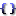
<style>
.page{position:relative;width:16px;height:16px;background:#ffffff}
.page>*{position:absolute;margin:0}
.t1{font:12px "Consolas-Bold"}
</style>
<div class="page">
<p class="t1" style="left:0px;top:3px;width:6px;height:11px">{</p>
<p class="t1" style="left:10px;top:3px;width:6px;height:11px">}</p>
</div>
